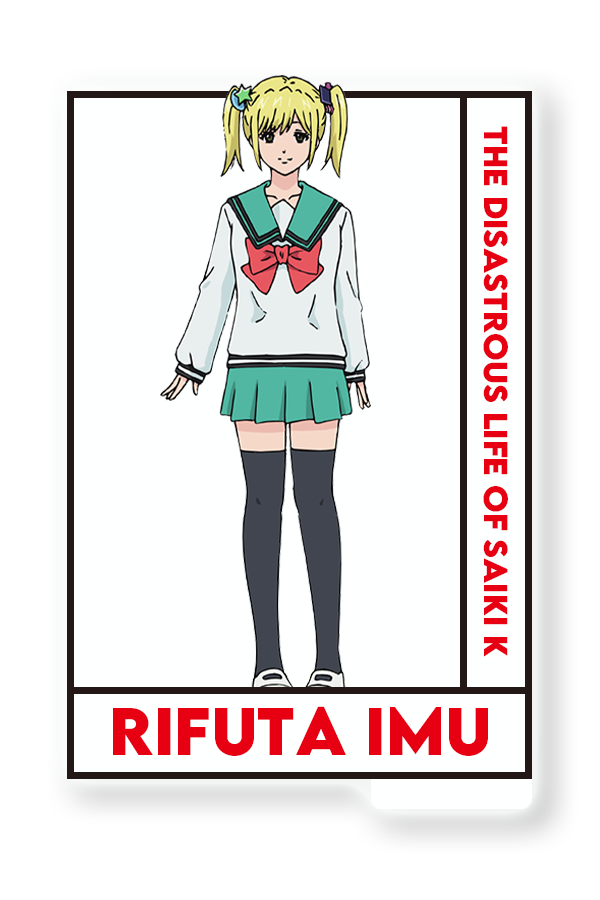
<style>
.page{position:relative;width:600px;height:900px;background:#feffff}
.page>*{position:absolute;margin:0}
.t1{font:29.6px "LEMONMILK-Bold";color:#e70012}
.t2{font:60.3px "LEMONMILK-Bold";color:#e70012}
</style>
<div class="page">
<p class="t1" style="left:483px;top:126px;width:25px;height:531px;rotate:90deg">THE disastrous Life of saiki K</p>
<p class="t2" style="left:113px;top:706px;width:375px;height:50px">Rifuta Imu</p>
</div>
